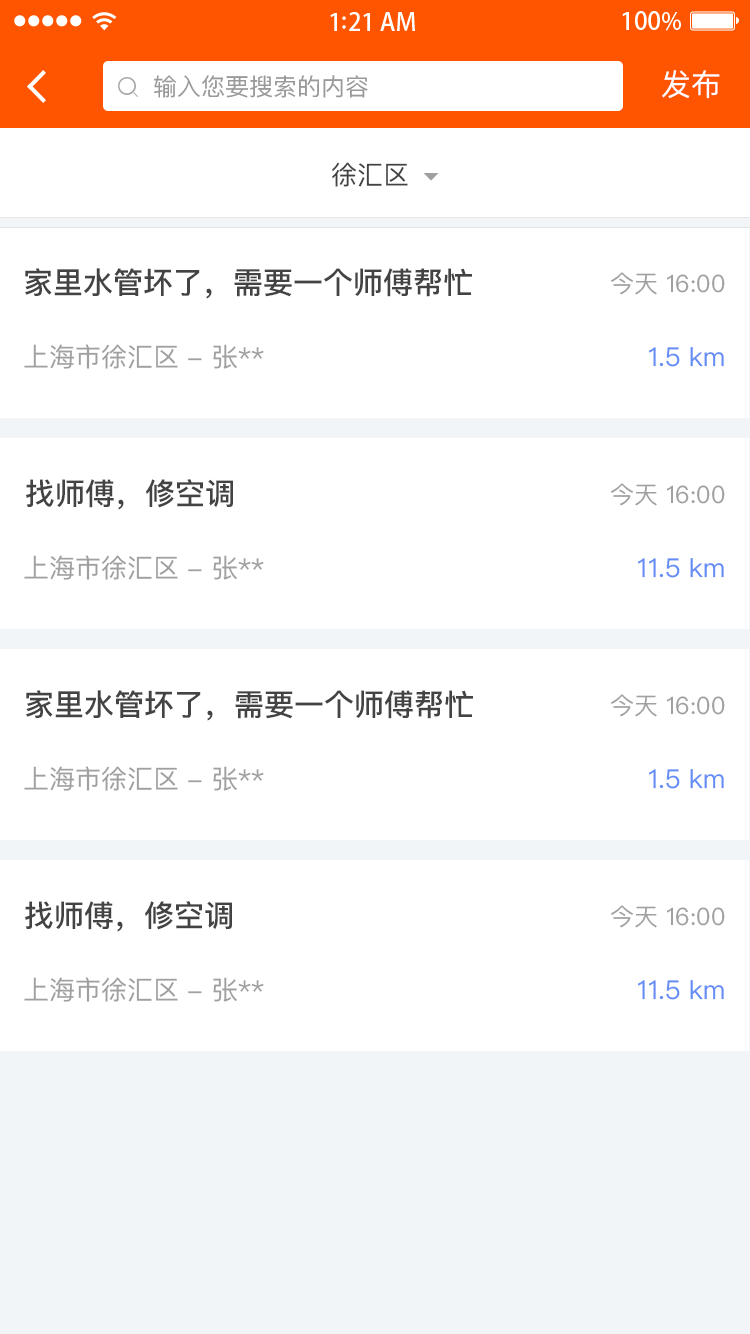
<style>
.page{position:relative;width:750px;height:1334px;background:#ffffff}
.page>*{position:absolute;margin:0}
.t1{font:24px "PingFangSC-Regular";color:#999999}
.t2{font:30px "PingFangSC-Regular";color:#ffffff}
.t3{font:26px "PingFangSC-Regular";color:#434343}
.t4{font:30px "PingFangSC-Medium";color:#434343}
.t5{font:24px "PingFangSC-Regular";color:#a0a0a0}
.t6{font:26px "PingFangSC-Regular";color:#a0a0a0}
.t7{font:26px "PingFangSC-Regular";color:#648df6}
</style>
<div class="page">
<p class="t1" style="left:154px;top:75px;width:214px;height:23px">输入您要搜索的内容</p>
<p class="t2" style="left:662px;top:70px;width:58px;height:29px">发布</p>
<p class="t3" style="left:332px;top:162px;width:76px;height:25px">徐汇区</p>
<p class="t4" style="left:25px;top:268px;width:447px;height:31px">家里水管坏了，需要一个师傅帮忙</p>
<p class="t5" style="left:611px;top:272px;width:114px;height:23px">今天 16:00</p>
<p class="t6" style="left:24px;top:344px;width:240px;height:25px">上海市徐汇区 - 张**</p>
<p class="t7" style="left:649px;top:347px;width:75px;height:20px">1.5 km</p>
<p class="t4" style="left:26px;top:479px;width:207px;height:31px">找师傅，修空调</p>
<p class="t5" style="left:611px;top:483px;width:114px;height:23px">今天 16:00</p>
<p class="t6" style="left:24px;top:555px;width:240px;height:25px">上海市徐汇区 - 张**</p>
<p class="t7" style="left:638px;top:558px;width:86px;height:20px">11.5 km</p>
<p class="t4" style="left:26px;top:690px;width:447px;height:31px">家里水管坏了，需要一个师傅帮忙</p>
<p class="t5" style="left:611px;top:694px;width:114px;height:23px">今天 16:00</p>
<p class="t6" style="left:24px;top:766px;width:240px;height:25px">上海市徐汇区 - 张**</p>
<p class="t7" style="left:649px;top:769px;width:75px;height:20px">1.5 km</p>
<p class="t4" style="left:25px;top:901px;width:207px;height:31px">找师傅，修空调</p>
<p class="t5" style="left:611px;top:905px;width:114px;height:23px">今天 16:00</p>
<p class="t6" style="left:24px;top:977px;width:240px;height:25px">上海市徐汇区 - 张**</p>
<p class="t7" style="left:638px;top:980px;width:86px;height:20px">11.5 km</p>
</div>
